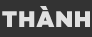
<style>
.page{position:relative;width:92px;height:37px;background:#333333}
.page>*{position:absolute;margin:0}
.t1{font:23px "GalanoGrotesque-Heavy";letter-spacing:0.05em;color:#e0e0e0;text-transform:uppercase}
</style>
<div class="page">
<p class="t1" style="left:2px;top:6px;width:88px;height:21px">Thành</p>
</div>
